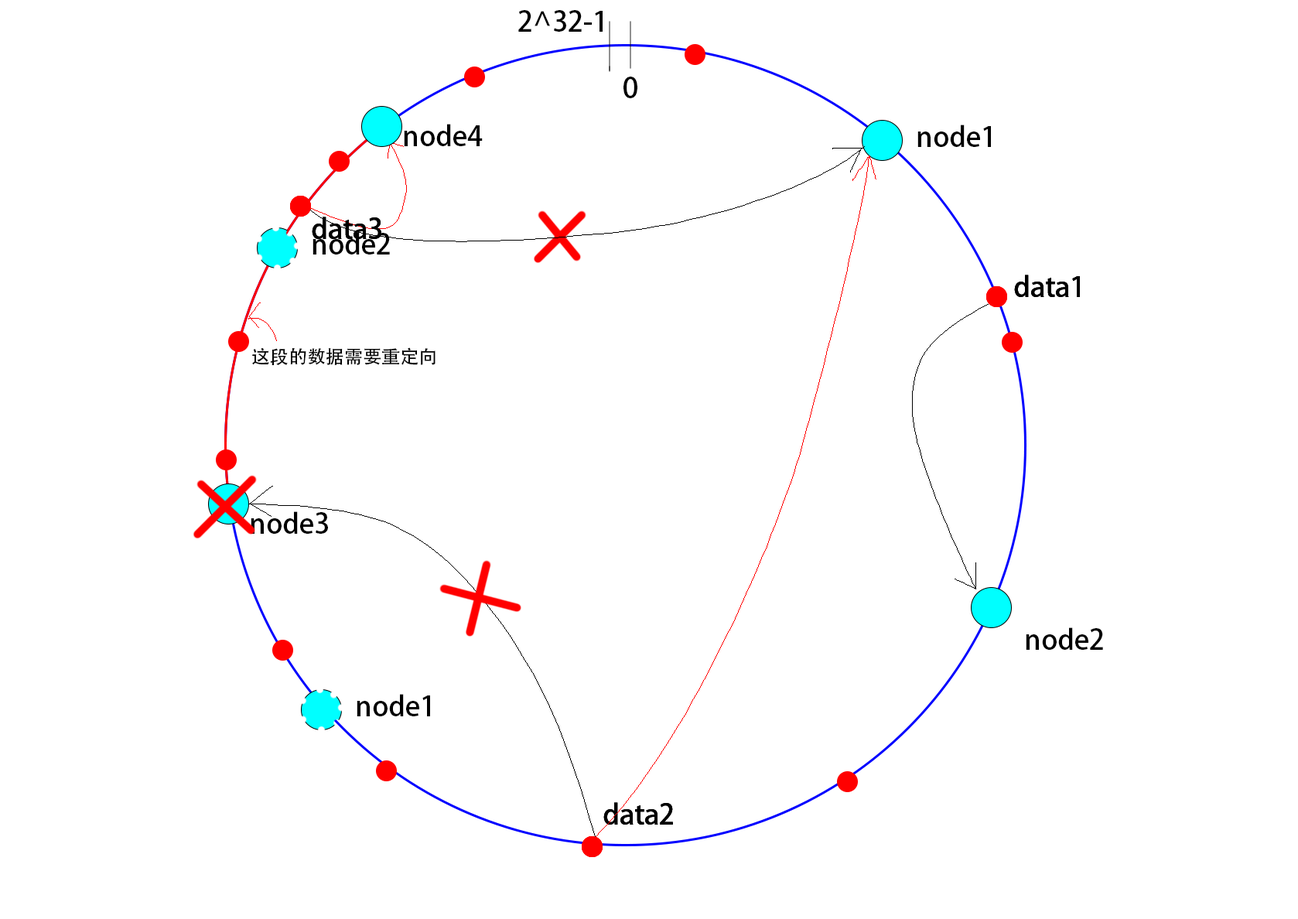
<style>
.page{position:relative;width:1298px;height:919px;background:#ffffff}
.page>*{position:absolute;margin:0}
.t1{font:27.8px "AdobeHeitiStd-Regular";color:#000000}
.t2{font:18.6px "AdobeHeitiStd-Regular";color:#000000}
</style>
<div class="page">
<p class="t1" style="left:518px;top:10px;width:84px;height:22px">2^32-1</p>
<p class="t1" style="left:623px;top:77px;width:14px;height:21px">0</p>
<p class="t1" style="left:404px;top:124px;width:79px;height:22px">node4</p>
<p class="t1" style="left:917px;top:125px;width:74px;height:22px">node1</p>
<p class="t1" style="left:312px;top:217px;width:69px;height:22px">data3</p>
<p class="t1" style="left:312px;top:217px;width:69px;height:22px">data3</p>
<p class="t1" style="left:312px;top:217px;width:69px;height:22px">data3</p>
<p class="t1" style="left:312px;top:232px;width:78px;height:22px">node2</p>
<p class="t1" style="left:1014px;top:275px;width:66px;height:22px">data1</p>
<p class="t1" style="left:1014px;top:275px;width:66px;height:22px">data1</p>
<p class="t1" style="left:1014px;top:275px;width:66px;height:22px">data1</p>
<p class="t2" style="left:252px;top:347px;width:183px;height:18px">这段的数据需要重定向</p>
<p class="t1" style="left:251px;top:511px;width:77px;height:23px">node3</p>
<p class="t1" style="left:1026px;top:627px;width:77px;height:23px">node2</p>
<p class="t1" style="left:357px;top:694px;width:73px;height:22px">node1</p>
<p class="t1" style="left:603px;top:802px;width:70px;height:22px">data2</p>
<p class="t1" style="left:603px;top:802px;width:70px;height:22px">data2</p>
<p class="t1" style="left:603px;top:802px;width:70px;height:22px">data2</p>
</div>
